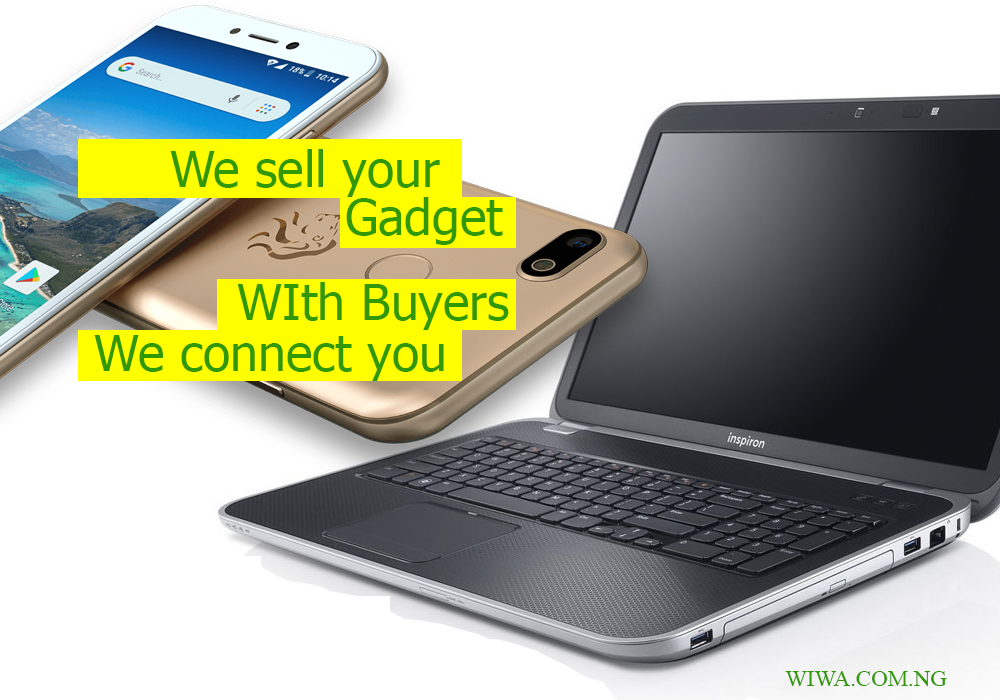
<style>
.page{position:relative;width:1000px;height:700px;background:#ffffff}
.page>*{position:absolute;margin:0}
.t1{font:50px "Tahoma";color:#319908}
.t2{font:22.9px "TimesNewRomanPSMT";color:#319908}
</style>
<div class="page">
<p class="t1" style="left:170px;top:149px;width:270px;height:48px">We sell your</p>
<p class="t1" style="left:346px;top:197px;width:157px;height:48px">Gadget</p>
<p class="t1" style="left:237px;top:282px;width:272px;height:48px">WIth Buyers</p>
<p class="t1" style="left:94px;top:335px;width:350px;height:46px">We connect you</p>
<p class="t2" style="left:785px;top:671px;width:162px;height:16px">WIWA.COM.NG</p>
</div>
